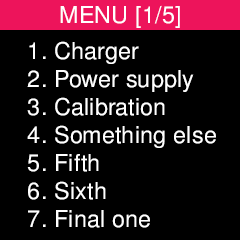
<style>
.page{position:relative;width:240px;height:240px;background:#000000}
.page>*{position:absolute;margin:0}
.t1{font:23.3px "FreeSans";letter-spacing:0.01em;color:#ffffff}
</style>
<div class="page">
<p class="t1" style="left:60px;top:5px;width:120px;height:23px">MENU [1/5]</p>
<p class="t1" style="left:27px;top:41px;width:189px;height:187px">1. Charger<br>2. Power supply<br>3. Calibration<br>4. Something else<br>5. Fifth<br>6. Sixth<br>7. Final one</p>
</div>
